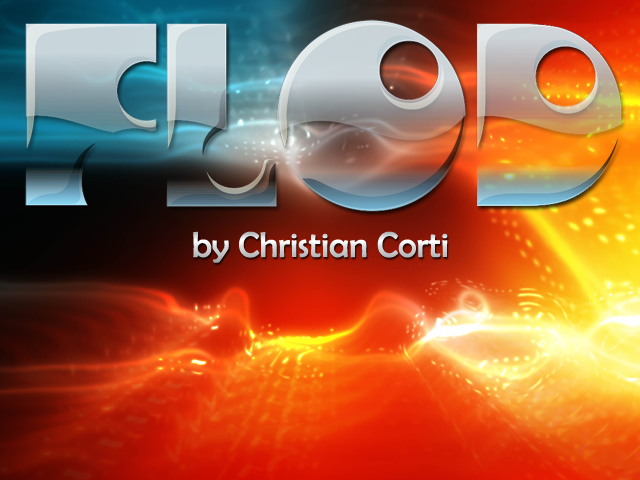
<style>
.page{position:relative;width:640px;height:480px}
.page>*{position:absolute;margin:0}
.t1{font:36px "BerlinSansFB-Reg"}
</style>
<div class="page">
<p class="t1" style="left:193px;top:231px;width:255px;height:32px">by Christian Corti</p>
</div>
